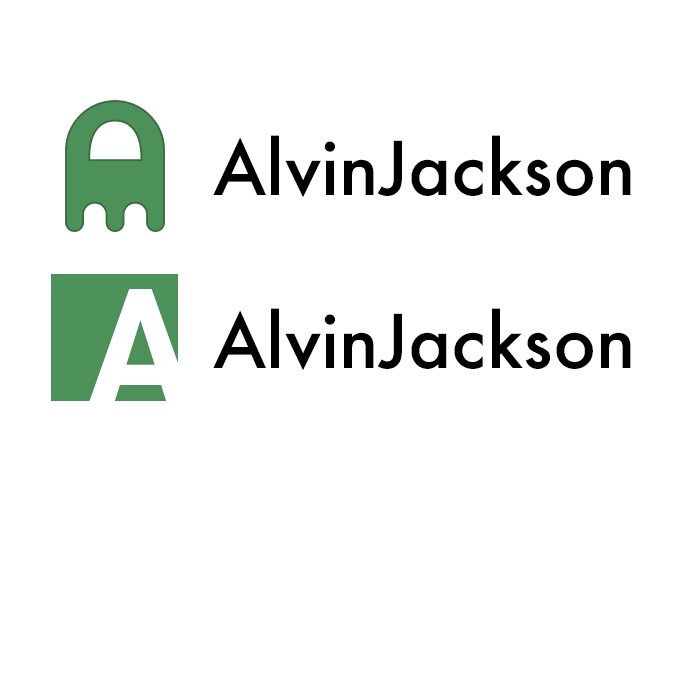
<style>
.page{position:relative;width:700px;height:700px;background:#ffffff}
.page>*{position:absolute;margin:0}
.t1{font:72px "Futura-Medium";color:#000000}
.t2{font:170.2px "Roboto-Bold";letter-spacing:-0.005em;color:#ffffff;scale:0.95 1}
</style>
<div class="page">
<p class="t1" style="left:213px;top:135px;width:418px;height:63px">AlvinJackson</p>
<p class="t2" style="left:86px;top:289px;width:109px;height:121px">A</p>
<p class="t1" style="left:213px;top:308px;width:418px;height:63px">AlvinJackson</p>
</div>
